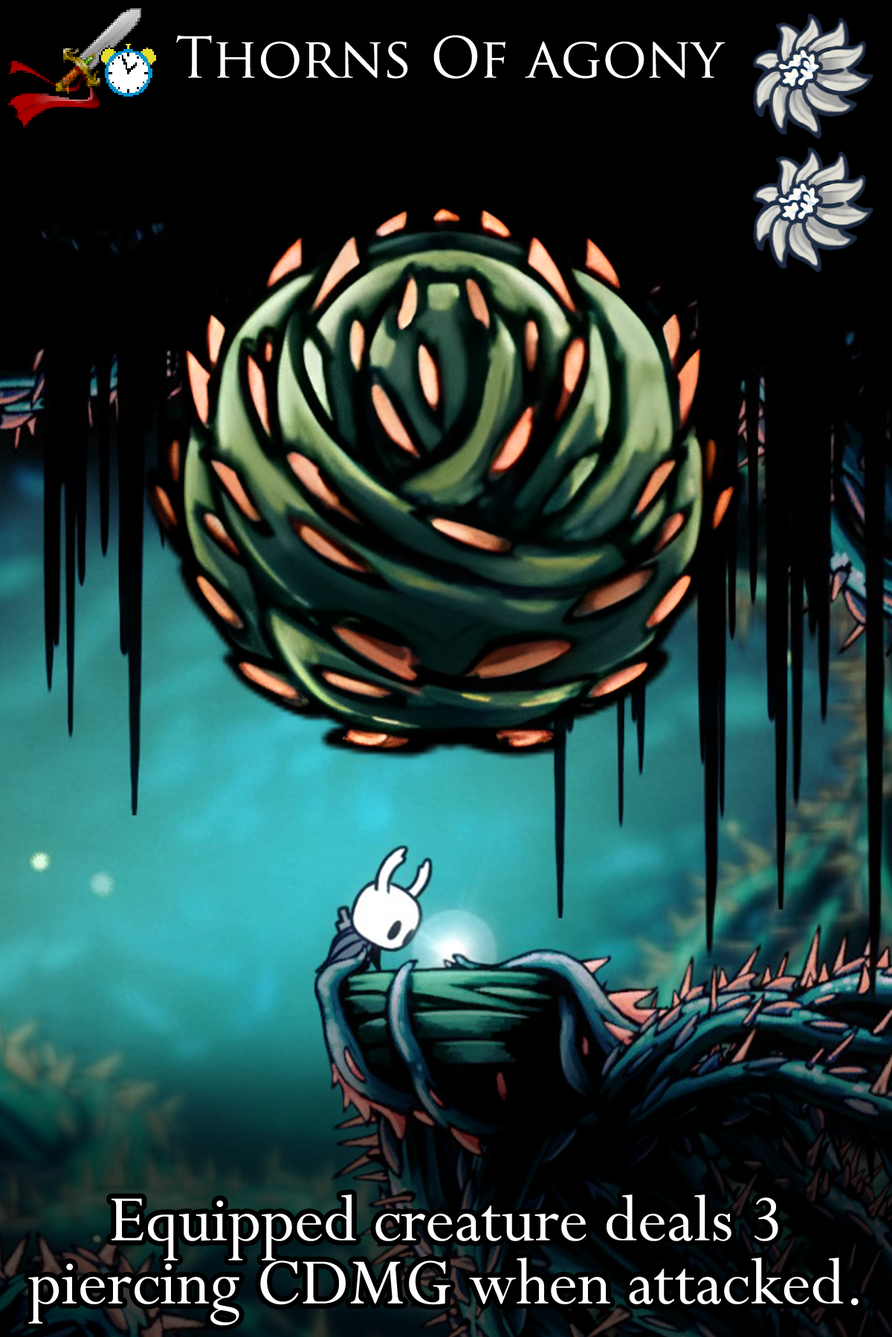
<style>
.page{position:relative;width:892px;height:1337px;background:#000000}
.page>*{position:absolute;margin:0}
.t1{font:94.4px "TrajanPro-Regular";color:#ffffff}
.t2{font:124.1px "Perpetua";color:#ffffff}
</style>
<div class="page">
<p class="t1" style="left:176px;top:35px;width:549px;height:44px">Thorns Of agony</p>
<p class="t2" style="left:28px;top:1195px;width:830px;height:131px">Equipped creature deals 3 piercing CDMG when attacked.</p>
</div>
